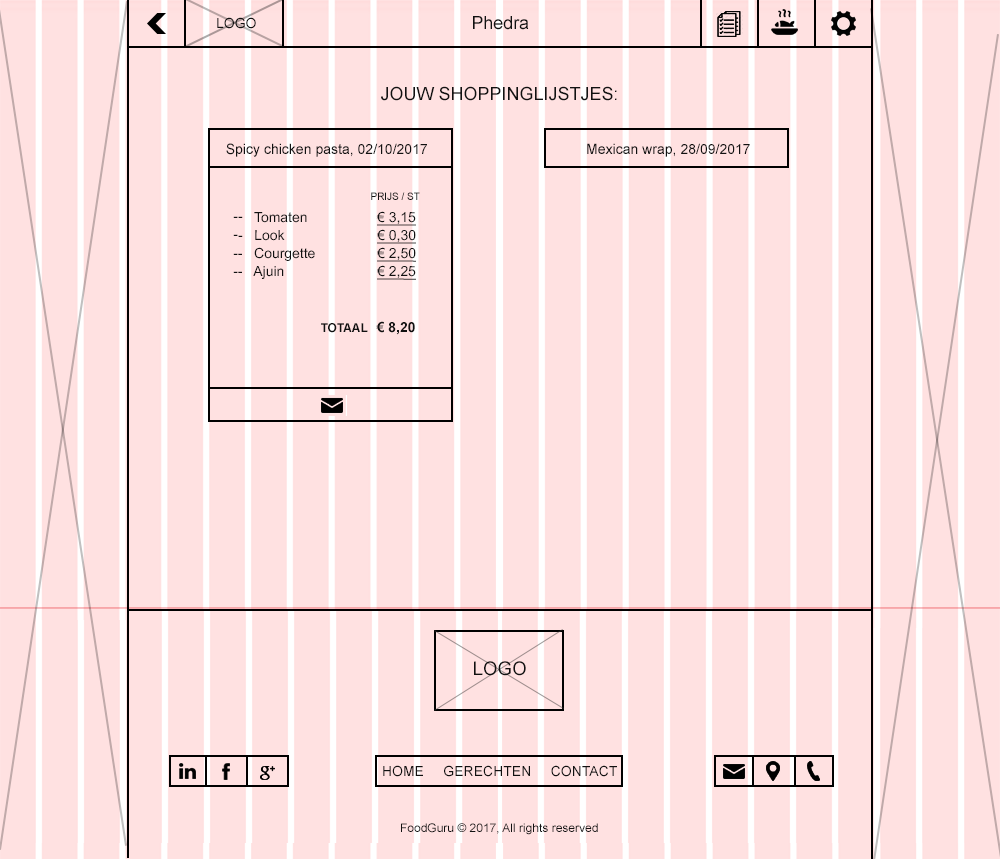
<style>
.page{position:relative;width:1000px;height:859px;background:#ffe1e1}
.page>*{position:absolute;margin:0}
.t1{font:14px "ArialMT";color:#111111}
.t2{font:18px "ArialMT";color:#111111}
.t3{font:14.4px "ArialMT";color:#111111}
.t4{font:14.3px "ArialMT";color:#111111}
.t5{font:10.1px "ArialMT";color:#111111}
.t6{font:14px/18px "ArialMT";color:#111111}
.t7{font:14px/18px "ArialMT";color:#111111;text-decoration:underline}
.t8{font:12px "Arial-BoldMT";color:#111111}
.t9{font:14px "Arial-BoldMT";color:#111111}
</style>
<div class="page">
<p class="t1" style="left:217px;top:17px;width:39px;height:12px">LOGO</p>
<p class="t2" style="left:473px;top:16px;width:56px;height:14px">Phedra</p>
<p class="t2" style="left:381px;top:86px;width:236px;height:15px">JOUW SHOPPINGLIJSTJES:</p>
<p class="t3" style="left:226px;top:143px;width:201px;height:14px">Spicy chicken pasta, 02/10/2017</p>
<p class="t4" style="left:587px;top:143px;width:163px;height:14px">Mexican wrap, 28/09/2017</p>
<p class="t5" style="left:371px;top:192px;width:49px;height:8px">PRIJS / ST</p>
<p class="t6" style="left:233px;top:211px;width:183px;height:69px">--   Tomaten                  <span class="t7">€ 3,15<br></span>--   Look                        <span class="t7">€ 0,30<br></span>--   Courgette                <span class="t7">€ 2,50<br></span>--   Ajuin                        <span class="t7">€ 2,25</span></p>
<p class="t8" style="left:321px;top:321px;width:94px;height:14px">TOTAAL   <span class="t9">€ 8,20</span></p>
</div>
